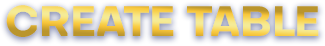
<style>
.page{position:relative;width:325px;height:46px}
.page>*{position:absolute;margin:0}
.t1{font:41.7px "Octarine-Bold";text-transform:uppercase}
</style>
<div class="page">
<p class="t1" style="left:6px;top:5px;width:313px;height:32px">Create Table</p>
</div>
